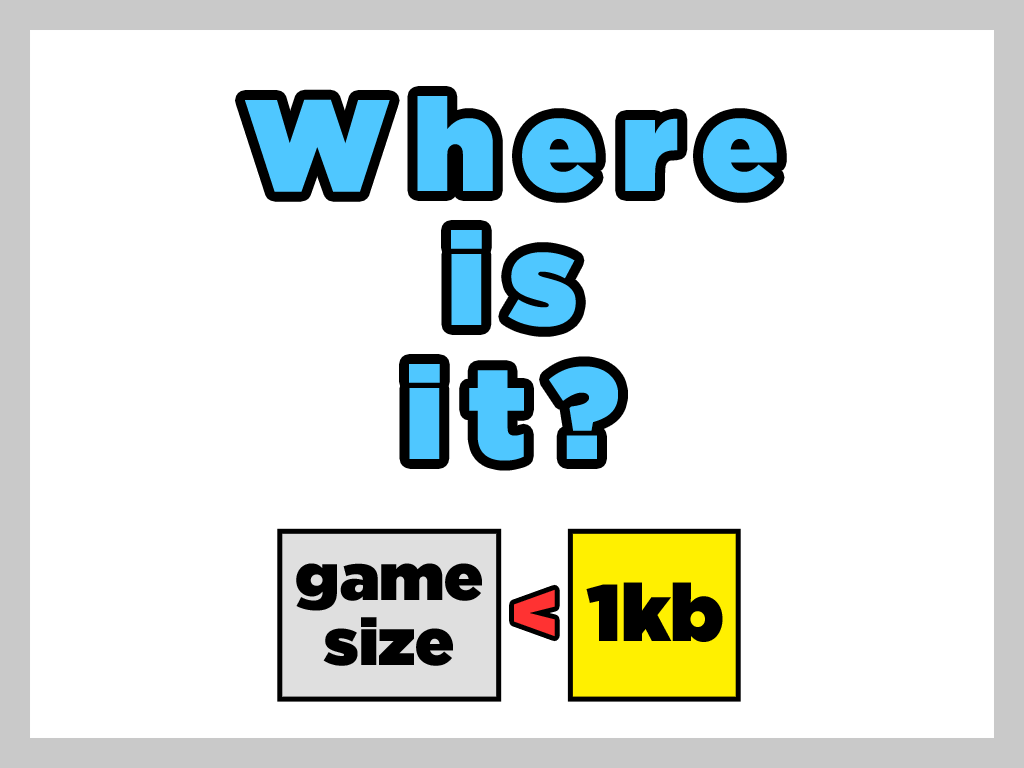
<style>
.page{position:relative;width:1024px;height:768px;background:#ffffff}
.page>*{position:absolute;margin:0}
.t1{font:130px/134px "GothamUltra";letter-spacing:0.18em;color:#4fc7ff}
.t2{font:65.5px/64.8px "GothamUltra";color:#000000}
.t3{font:80.1px "GothamUltra";color:#000000}
.t4{font:80.1px "GothamUltra";color:#ff3232}
</style>
<div class="page">
<p class="t1" style="left:245px;top:96px;width:532px;height:365px;text-align:center">Where<br>is<br>it?</p>
<p class="t2" style="left:296px;top:563px;width:186px;height:103px;text-align:center">game<br>size</p>
<p class="t3" style="left:586px;top:582px;width:137px;height:60px">1kb</p>
<p class="t4" style="left:514px;top:589px;width:41px;height:48px">&lt;</p>
</div>
